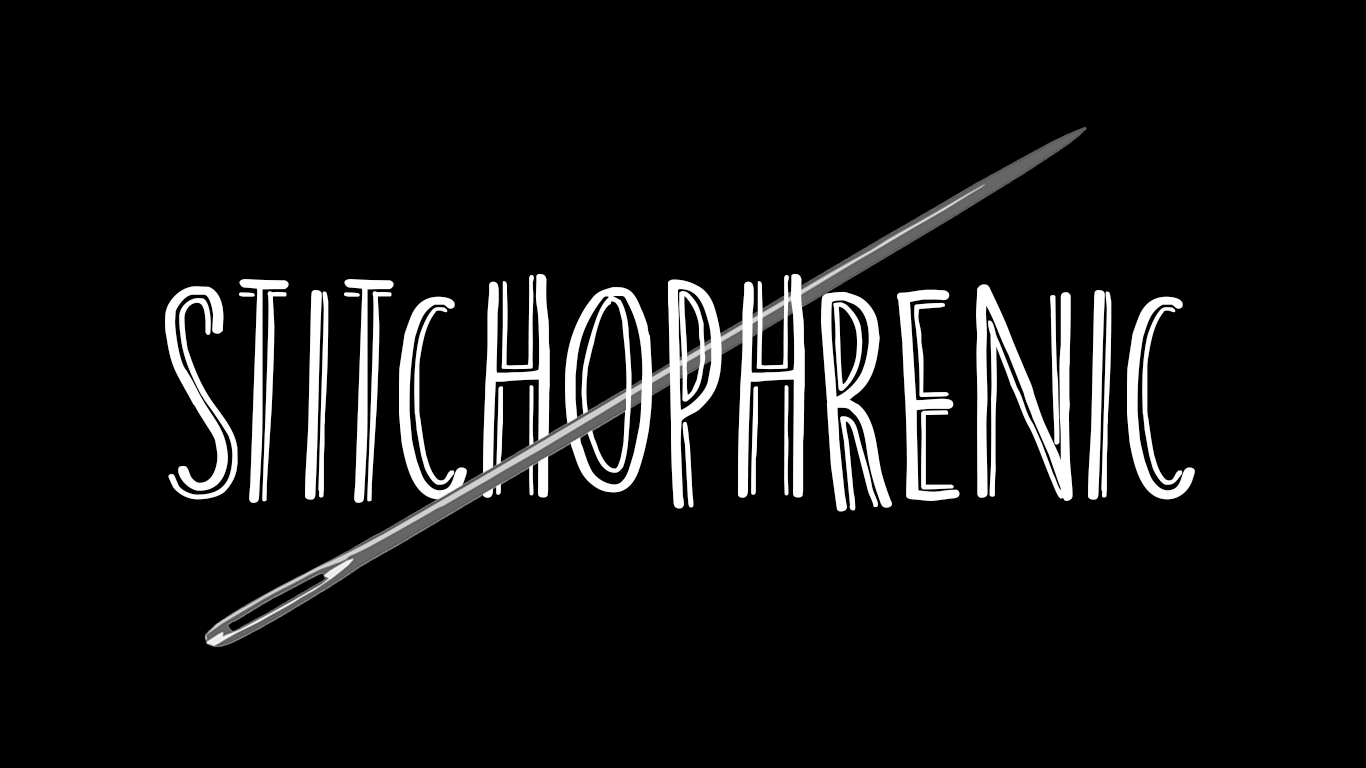
<style>
.page{position:relative;width:1366px;height:768px;background:#000000}
.page>*{position:absolute;margin:0}
.t1{font:268.5px "DKBreakfastBurrito";color:#ffffff}
</style>
<div class="page">
<p class="t1" style="left:165px;top:273px;width:1030px;height:239px">STITCHOPHRENIC</p>
</div>
